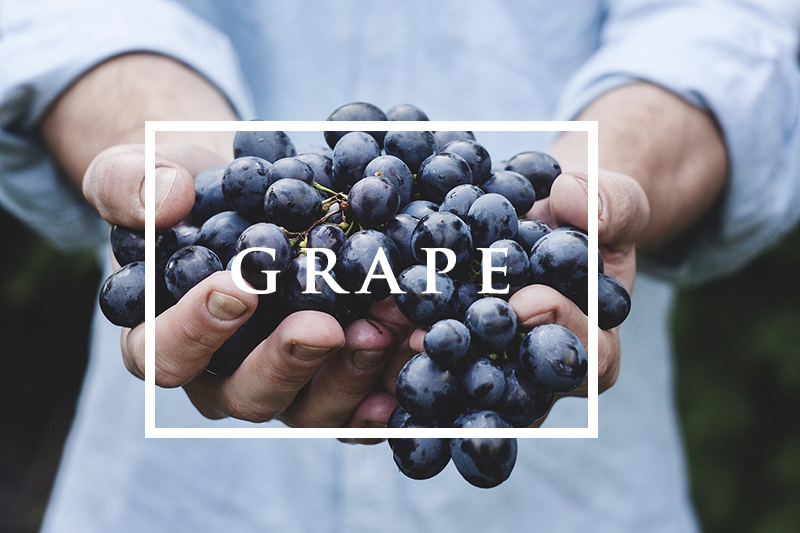
<style>
.page{position:relative;width:800px;height:533px}
.page>*{position:absolute;margin:0}
.t1{font:70px "TrajanPro-Bold";letter-spacing:0.2em;color:#ffffff}
</style>
<div class="page">
<p class="t1" style="left:231px;top:247px;width:279px;height:47px">grape</p>
</div>
